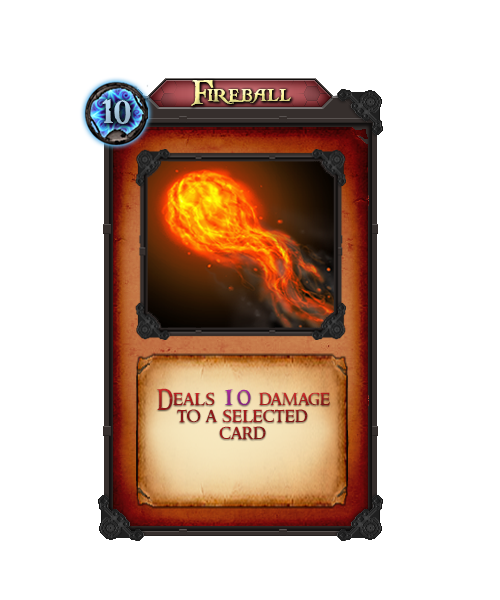
<style>
.page{position:relative;width:500px;height:600px;background:#ffffff}
.page>*{position:absolute;margin:0}
.t1{font:36px "PiecesofEight"}
.t2{font:36px "PiecesofEight";color:#a4c4da}
.t3{font:20px/17px "RingbearerMedium"}
.t4{font:30px/17px "RingbearerMedium"}
</style>
<div class="page">
<p class="t1" style="left:191px;top:80px;width:100px;height:26px">Fireball</p>
<p class="t2" style="left:102px;top:99px;width:29px;height:25px">10</p>
<p class="t3" style="left:157px;top:388px;width:173px;height:52px;text-align:center">Deals<span class="t4"> 10 </span>damage to a selected card</p>
</div>
